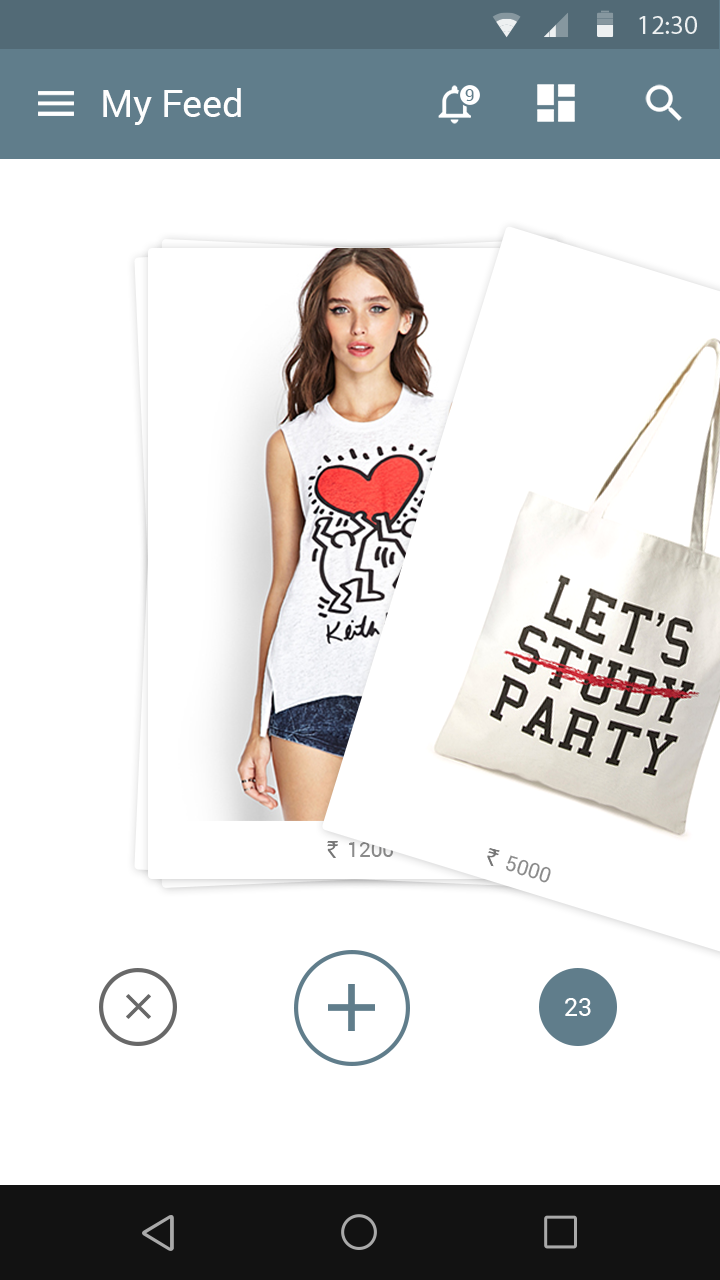
<style>
.page{position:relative;width:720px;height:1280px;background:#ffffff}
.page>*{position:absolute;margin:0}
.t1{font:37.5px "Roboto-Regular";color:#fefefe}
.t2{font:16.7px "Roboto-Regular";letter-spacing:0.06em;color:#607d8b}
.t3{font:20.8px "Roboto-Regular";color:#8b8b8b}
.t4{font:25px "Roboto-Regular";color:#ffffff}
</style>
<div class="page">
<p class="t1" style="left:103px;top:88px;width:138px;height:37px">My Feed</p>
<p class="t2" style="left:465px;top:89px;width:9px;height:12px">9</p>
<p class="t3" style="left:506px;top:855px;width:45px;height:28px;rotate:17deg">5000</p>
<p class="t4" style="left:565px;top:998px;width:26px;height:18px">23</p>
</div>
